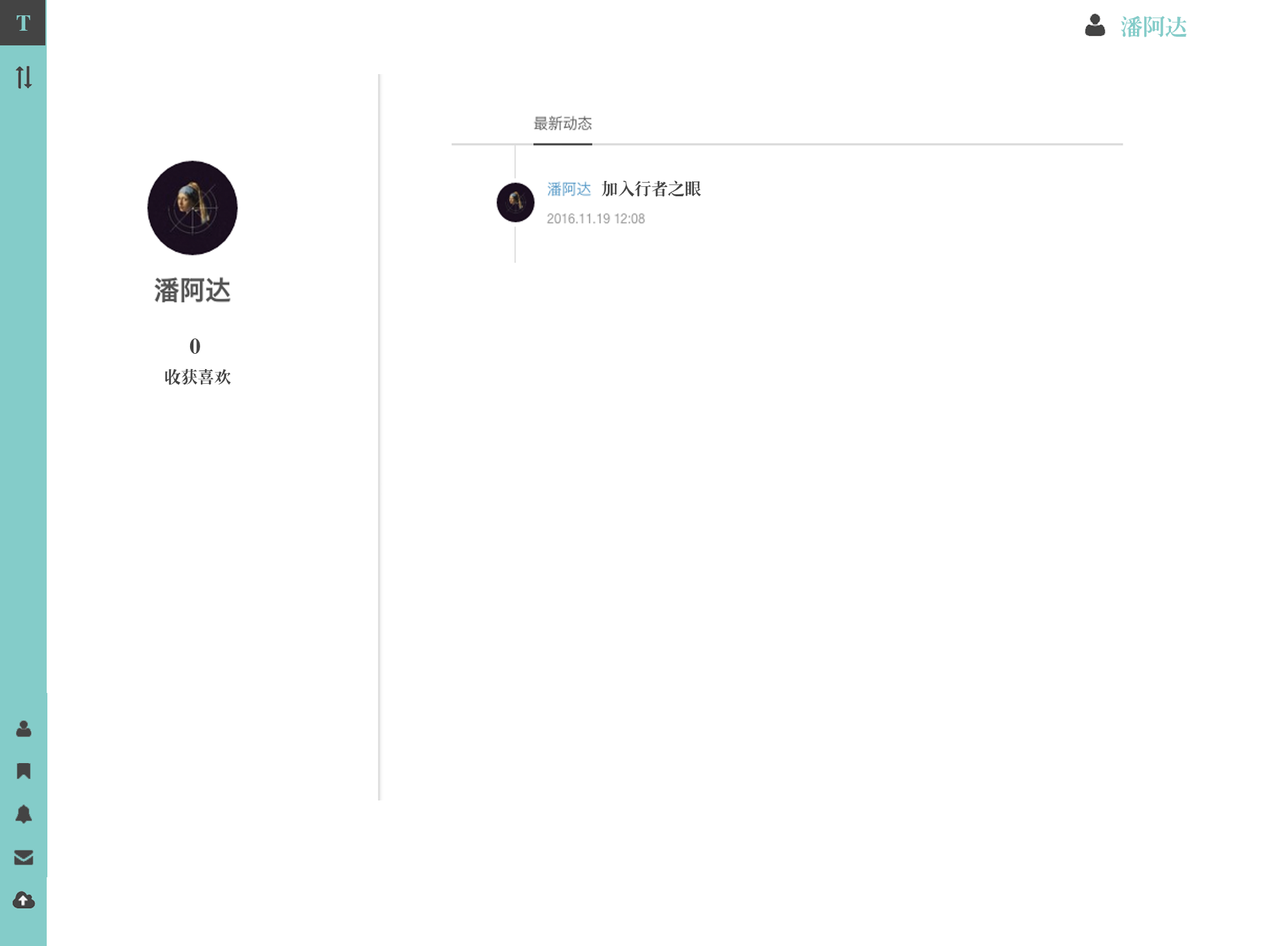
<style>
.page{position:relative;width:1261px;height:946px;background:#ffffff}
.page>*{position:absolute;margin:0}
.t1{font:22.2px "JQLaoSongJT";color:#84ccc9}
.t2{font:16.7px "JQLaoSongJT";color:#444444}
.t3{font:22.2px "JQLaoSongJT";color:#444444}
</style>
<div class="page">
<p class="t1" style="left:17px;top:15px;width:14px;height:16px">T</p>
<p class="t1" style="left:1121px;top:16px;width:66px;height:21px">潘阿达</p>
<p class="t2" style="left:601px;top:180px;width:100px;height:17px">加入行者之眼</p>
<p class="t3" style="left:190px;top:338px;width:10px;height:16px">0</p>
<p class="t2" style="left:165px;top:368px;width:66px;height:17px">收获喜欢</p>
</div>
